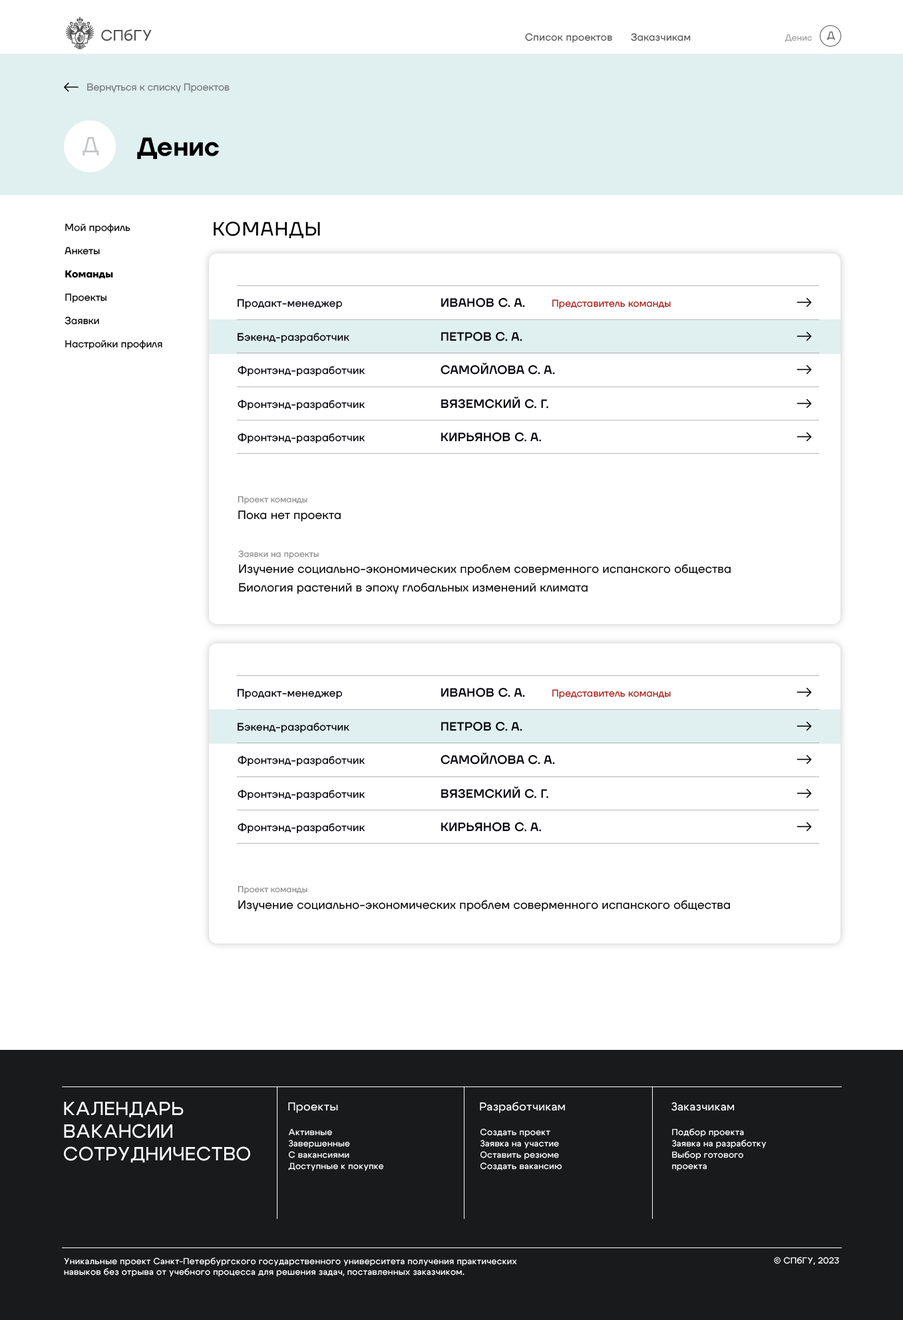
<style>
.page{position:relative;width:903px;height:1320px;background:#ffffff}
.page>*{position:absolute;margin:0}
.t1{font:15.1px "Cygre-Medium";letter-spacing:0.025em;color:#555555}
.t2{font:10px "TTFirsNeue-Regular";letter-spacing:0.025em;color:#555555}
.t3{font:8.7px "TTFirsNeue-Regular";letter-spacing:0.01em;color:#9c9c9c}
.t4{font:10px "TTFirsNeue-Regular";color:#636466}
.t5{font:10px "TTFirsNeue-Regular";color:#77787b}
.t6{font:22px "TTFirsNeue-Regular";color:#c4c6c8}
.t7{font:26px "TTFirsNeue-DemiBold";color:#000000}
.t8{font:19.3px "TTFirsNeue-Regular";letter-spacing:0.05em;color:#000000}
.t9{font:10px/23.3px "TTFirsNeue-Regular";letter-spacing:0.013em;color:#000000}
.t10{font:10px/23.3px "TTFirsNeue-Bold";letter-spacing:0.013em;color:#000000}
.t11{font:10.6px "TTFirsNeue-Regular";letter-spacing:0.025em;color:#000007}
.t12{font:12px "TTFirsNeue-Medium";letter-spacing:0.025em;color:#000007}
.t13{font:10px "TTFirsNeue-Regular";letter-spacing:0.01em;color:#a52019}
.t14{font:8.7px "TTFirsNeue-Regular";letter-spacing:0.01em;color:#898989}
.t15{font:12px "TTFirsNeue-Regular";letter-spacing:0.01em;color:#000000}
.t16{font:12px/18.6px "TTFirsNeue-Regular";letter-spacing:0.01em;color:#000000}
.t17{font:18.9px "Cygre-Medium";letter-spacing:0.025em;color:#ffffff}
.t18{font:11.3px "Cygre-Medium";letter-spacing:0.025em;color:#ffffff}
.t19{font:8.7px/11.3px "Cygre-Medium";letter-spacing:0.025em;color:#ffffff}
.t20{font:8.7px "Cygre-Medium";letter-spacing:0.025em;color:#ffffff}
</style>
<div class="page">
<p class="t1" style="left:101px;top:29px;width:51px;height:12px">СПбГУ</p>
<p class="t2" style="left:525px;top:33px;width:166px;height:10px">Список проектов      Заказчикам</p>
<p class="t3" style="left:785px;top:34px;width:27px;height:8px">Денис</p>
<p class="t4" style="left:827px;top:31px;width:8px;height:10px">Д</p>
<p class="t5" style="left:87px;top:83px;width:143px;height:10px">Вернуться к списку Проектов</p>
<p class="t6" style="left:83px;top:137px;width:16px;height:19px">Д</p>
<p class="t7" style="left:137px;top:137px;width:82px;height:22px">Денис</p>
<p class="t8" style="left:214px;top:222px;width:106px;height:16px">КОМАНДЫ</p>
<p class="t9" style="left:65px;top:224px;width:97px;height:125px">Мой профиль<br>Анкеты<br><span class="t10">Команды<br></span>Проекты<br>Заявки<br>Настройки профиля</p>
<p class="t11" style="left:238px;top:299px;width:104px;height:10px">Продакт-менеджер</p>
<p class="t12" style="left:441px;top:297px;width:84px;height:10px">ИВАНОВ С. А.</p>
<p class="t13" style="left:552px;top:299px;width:119px;height:10px">Представитель команды</p>
<p class="t11" style="left:238px;top:333px;width:111px;height:10px">Бэкенд-разработчик</p>
<p class="t12" style="left:441px;top:331px;width:81px;height:10px">ПЕТРОВ С. А.</p>
<p class="t11" style="left:238px;top:365px;width:127px;height:12px">Фронтэнд-разработчик</p>
<p class="t12" style="left:441px;top:363px;width:114px;height:12px">САМОЙЛОВА С. А.</p>
<p class="t11" style="left:238px;top:399px;width:127px;height:12px">Фронтэнд-разработчик</p>
<p class="t12" style="left:441px;top:397px;width:107px;height:12px">ВЯЗЕМСКИЙ С. Г.</p>
<p class="t11" style="left:238px;top:433px;width:127px;height:11px">Фронтэнд-разработчик</p>
<p class="t12" style="left:441px;top:432px;width:100px;height:10px">КИРЬЯНОВ С. А.</p>
<p class="t14" style="left:238px;top:496px;width:69px;height:8px">Проект команды</p>
<p class="t15" style="left:238px;top:510px;width:103px;height:12px">Пока нет проекта</p>
<p class="t14" style="left:238px;top:550px;width:81px;height:9px">Заявки на проекты</p>
<p class="t16" style="left:239px;top:564px;width:492px;height:30px">Изучение социально-экономических проблем соверменного испанского общества<br>Биология растений в эпоху глобальных изменений климата</p>
<p class="t11" style="left:238px;top:689px;width:104px;height:10px">Продакт-менеджер</p>
<p class="t12" style="left:441px;top:687px;width:84px;height:10px">ИВАНОВ С. А.</p>
<p class="t13" style="left:552px;top:689px;width:119px;height:10px">Представитель команды</p>
<p class="t11" style="left:238px;top:723px;width:111px;height:10px">Бэкенд-разработчик</p>
<p class="t12" style="left:441px;top:721px;width:81px;height:10px">ПЕТРОВ С. А.</p>
<p class="t11" style="left:238px;top:755px;width:127px;height:12px">Фронтэнд-разработчик</p>
<p class="t12" style="left:441px;top:753px;width:114px;height:12px">САМОЙЛОВА С. А.</p>
<p class="t11" style="left:238px;top:789px;width:127px;height:12px">Фронтэнд-разработчик</p>
<p class="t12" style="left:441px;top:787px;width:107px;height:12px">ВЯЗЕМСКИЙ С. Г.</p>
<p class="t12" style="left:441px;top:822px;width:100px;height:10px">КИРЬЯНОВ С. А.</p>
<p class="t11" style="left:238px;top:823px;width:127px;height:11px">Фронтэнд-разработчик</p>
<p class="t14" style="left:238px;top:886px;width:69px;height:8px">Проект команды</p>
<p class="t15" style="left:238px;top:900px;width:492px;height:12px">Изучение социально-экономических проблем соверменного испанского общества</p>
<p class="t17" style="left:64px;top:1102px;width:186px;height:61px">КАЛЕНДАРЬ<br>ВАКАНСИИ<br>СОТРУДНИЧЕСТВО</p>
<p class="t18" style="left:288px;top:1102px;width:50px;height:11px">Проекты</p>
<p class="t18" style="left:480px;top:1102px;width:85px;height:11px">Разработчикам</p>
<p class="t18" style="left:672px;top:1102px;width:63px;height:9px">Заказчикам</p>
<p class="t19" style="left:288px;top:1129px;width:96px;height:42px">Активные<br>Завершенные<br>С вакансиями<br>Доступные к покупке</p>
<p class="t19" style="left:480px;top:1129px;width:82px;height:42px">Создать проект<br>Заявка на участие<br>Оставить резюме<br>Создать вакансию</p>
<p class="t19" style="left:672px;top:1129px;width:95px;height:42px">Подбор проекта<br>Заявка на разработку<br>Выбор готового<br>проекта</p>
<p class="t20" style="left:64px;top:1258px;width:453px;height:19px">Уникальные проект Санкт-Петербургского государственного университета получения практических навыков без отрыва от учебного процесса для решения задач, поставленных заказчиком.</p>
<p class="t20" style="left:774px;top:1257px;width:65px;height:9px">© СПбГУ, 2023</p>
</div>
